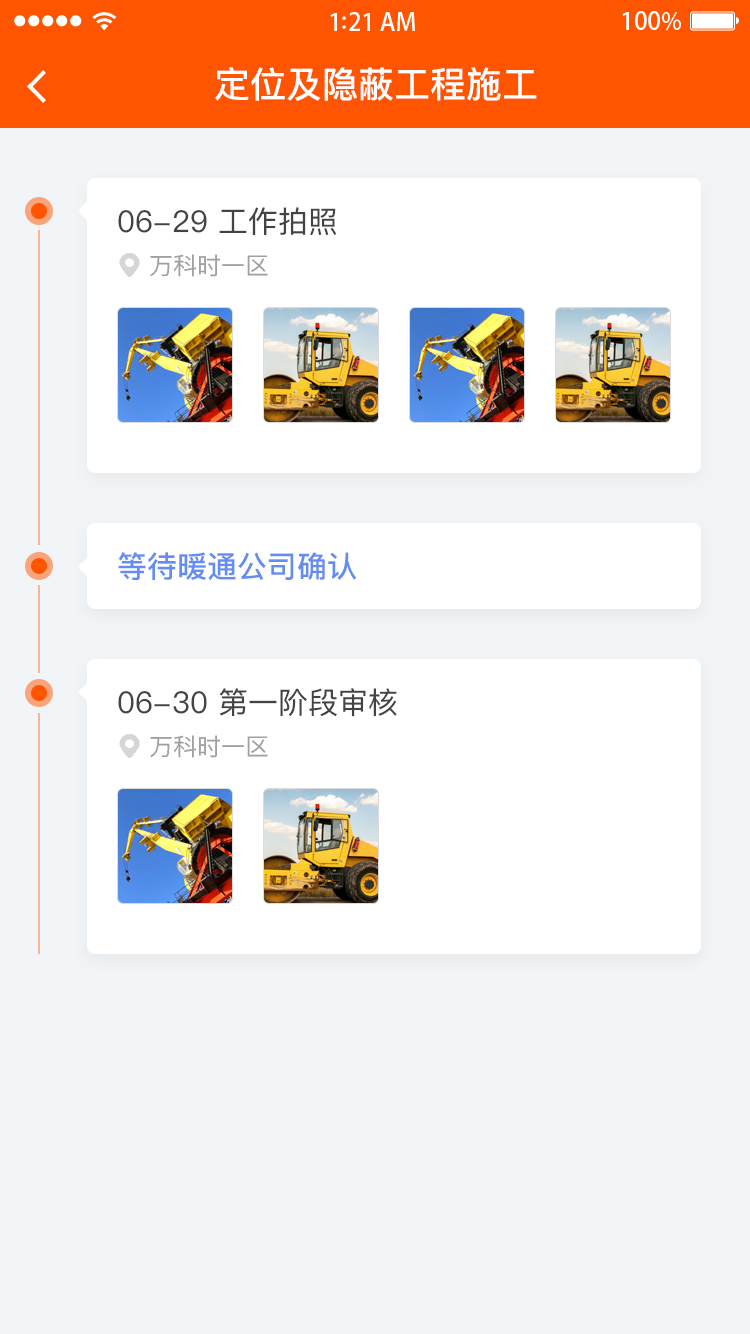
<style>
.page{position:relative;width:750px;height:1334px;background:#f2f5f7}
.page>*{position:absolute;margin:0}
.t1{font:36px "PingFangSC-Medium";color:#ffffff}
.t2{font:30px "PingFangSC-Regular";color:#434343}
.t3{font:24px "PingFangSC-Regular";color:#a0a0a0}
.t4{font:30px "PingFangSC-Medium";color:#648df4}
</style>
<div class="page">
<p class="t1" style="left:215px;top:67px;width:322px;height:34px">定位及隐蔽工程施工</p>
<p class="t2" style="left:118px;top:207px;width:219px;height:29px">06-29 工作拍照</p>
<p class="t3" style="left:150px;top:254px;width:118px;height:23px">万科时一区</p>
<p class="t4" style="left:118px;top:552px;width:239px;height:29px">等待暖通公司确认</p>
<p class="t2" style="left:118px;top:688px;width:279px;height:29px">06-30 第一阶段审核</p>
<p class="t3" style="left:150px;top:735px;width:118px;height:23px">万科时一区</p>
</div>
